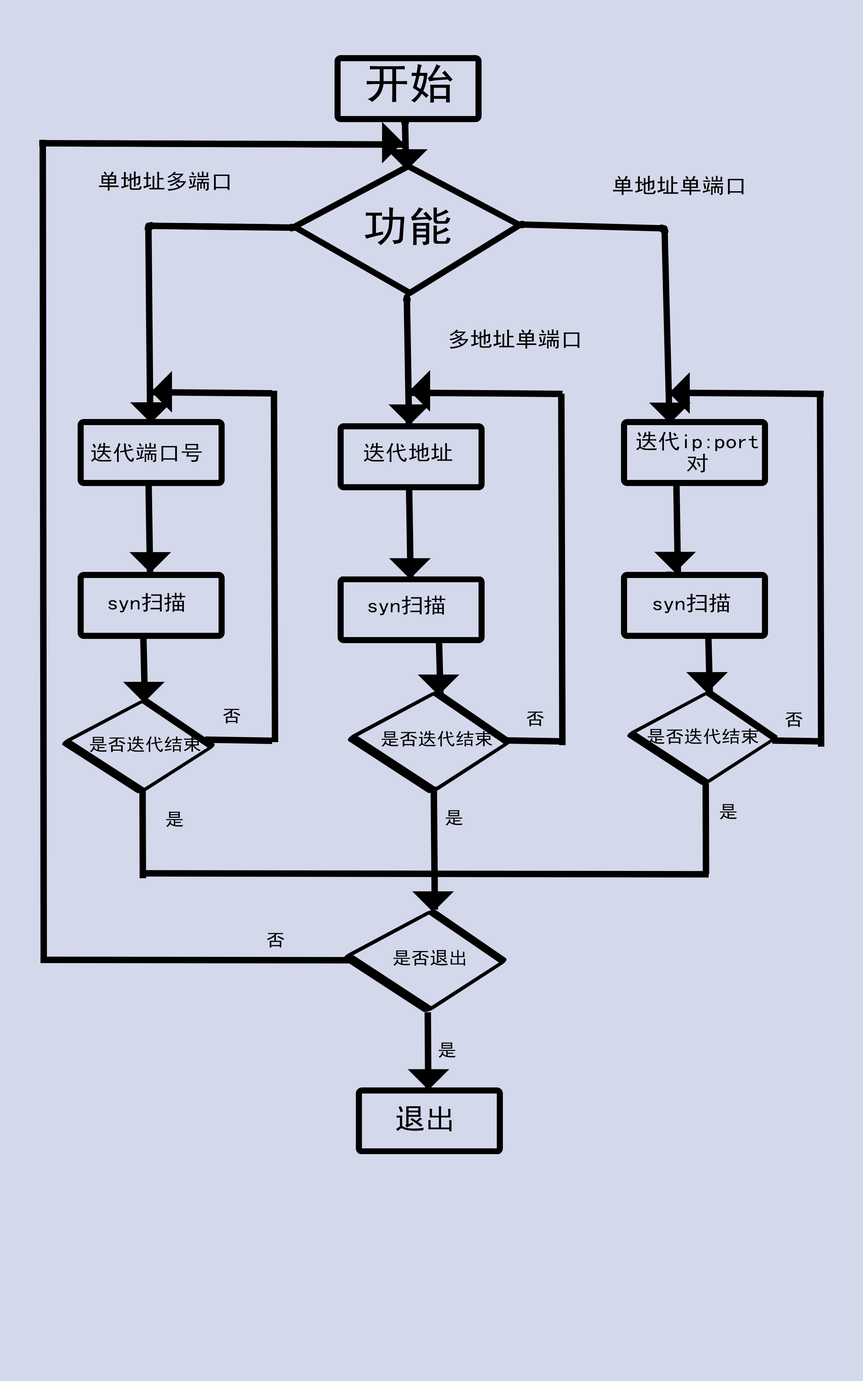
<style>
.page{position:relative;width:863px;height:1381px;background:#d3d8eb}
.page>*{position:absolute;margin:0}
.t1{font:20.8px/21.9px "SimHei";color:#000000;scale:1.08 1}
.t2{font:20.8px "SimHei";color:#000000;scale:1.08 1}
.t3{font:17.4px "SimHei";color:#000000;scale:1.08 1}
.t4{font:27.8px "SimHei";color:#000000;scale:1.08 1}
</style>
<div class="page">
<p class="t1" style="left:636px;top:431px;width:122px;height:42px;text-align:center">迭代ip:port<br>对</p>
<p class="t2" style="left:91px;top:443px;width:111px;height:19px">迭代端口号</p>
<p class="t2" style="left:364px;top:443px;width:89px;height:19px">迭代地址</p>
<p class="t2" style="left:108px;top:593px;width:77px;height:19px">syn扫描</p>
<p class="t2" style="left:654px;top:593px;width:77px;height:20px">syn扫描</p>
<p class="t2" style="left:368px;top:595px;width:78px;height:20px">syn扫描</p>
<p class="t3" style="left:223px;top:709px;width:18px;height:15px">否</p>
<p class="t3" style="left:527px;top:711px;width:17px;height:15px">否</p>
<p class="t3" style="left:785px;top:712px;width:18px;height:15px">否</p>
<p class="t3" style="left:90px;top:736px;width:111px;height:16px">是否迭代结束</p>
<p class="t3" style="left:382px;top:731px;width:111px;height:16px">是否迭代结束</p>
<p class="t3" style="left:648px;top:728px;width:111px;height:16px">是否迭代结束</p>
<p class="t3" style="left:720px;top:804px;width:17px;height:16px">是</p>
<p class="t3" style="left:166px;top:812px;width:17px;height:15px">是</p>
<p class="t3" style="left:446px;top:810px;width:17px;height:16px">是</p>
<p class="t3" style="left:267px;top:933px;width:17px;height:15px">否</p>
<p class="t3" style="left:393px;top:950px;width:72px;height:16px">是否退出</p>
<p class="t3" style="left:439px;top:1042px;width:17px;height:16px">是</p>
<p class="t4" style="left:396px;top:1106px;width:56px;height:25px">退出</p>
</div>
